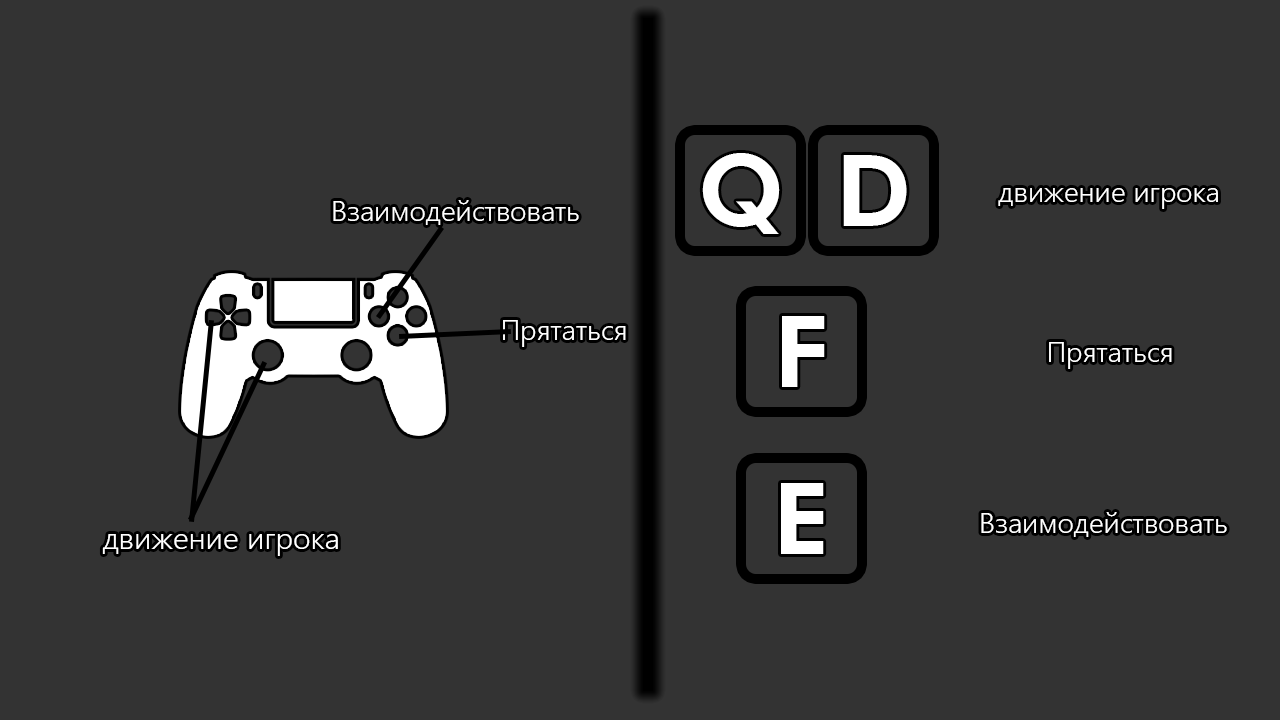
<style>
.page{position:relative;width:1280px;height:720px;background:#333333}
.page>*{position:absolute;margin:0}
.t1{font:100px "FuturaBT-Heavy";color:#ffffff}
.t2{font:28px "MalgunGothic-Semilight";color:#ffffff}
.t3{font:30px "MalgunGothic-Semilight";color:#ffffff}
</style>
<div class="page">
<p class="t1" style="left:702px;top:153px;width:78px;height:81px">Q</p>
<p class="t1" style="left:843px;top:155px;width:64px;height:71px">D</p>
<p class="t2" style="left:998px;top:188px;width:220px;height:21px">движение игрока</p>
<p class="t2" style="left:333px;top:200px;width:246px;height:25px">Взаимодействовать</p>
<p class="t1" style="left:782px;top:316px;width:43px;height:71px">F</p>
<p class="t2" style="left:503px;top:320px;width:123px;height:27px">Прятаться</p>
<p class="t2" style="left:1049px;top:342px;width:123px;height:27px">Прятаться</p>
<p class="t1" style="left:781px;top:483px;width:43px;height:71px">E</p>
<p class="t2" style="left:981px;top:512px;width:246px;height:25px">Взаимодействовать</p>
<p class="t3" style="left:102px;top:534px;width:236px;height:22px">движение игрока</p>
</div>
